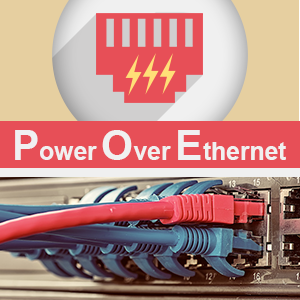
<style>
.page{position:relative;width:300px;height:300px}
.page>*{position:absolute;margin:0}
.t1{font:24.7px "Arial-BoldMT";color:#f0f0f0}
.t2{font:41.2px "Arial-BoldMT";color:#f0f0f0}
</style>
<div class="page">
<p class="t1" style="left:15px;top:130px;width:271px;height:30px"><span class="t2">P</span>ower <span class="t2">O</span>ver <span class="t2">E</span>thernet</p>
</div>
